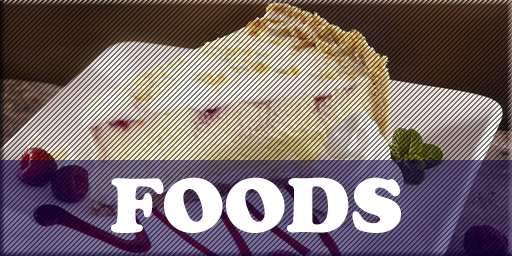
<style>
.page{position:relative;width:512px;height:256px}
.page>*{position:absolute;margin:0}
.t1{font:80px "CooperBlack";color:#ffffff}
</style>
<div class="page">
<p class="t1" style="left:111px;top:177px;width:290px;height:56px">FOODS</p>
</div>
